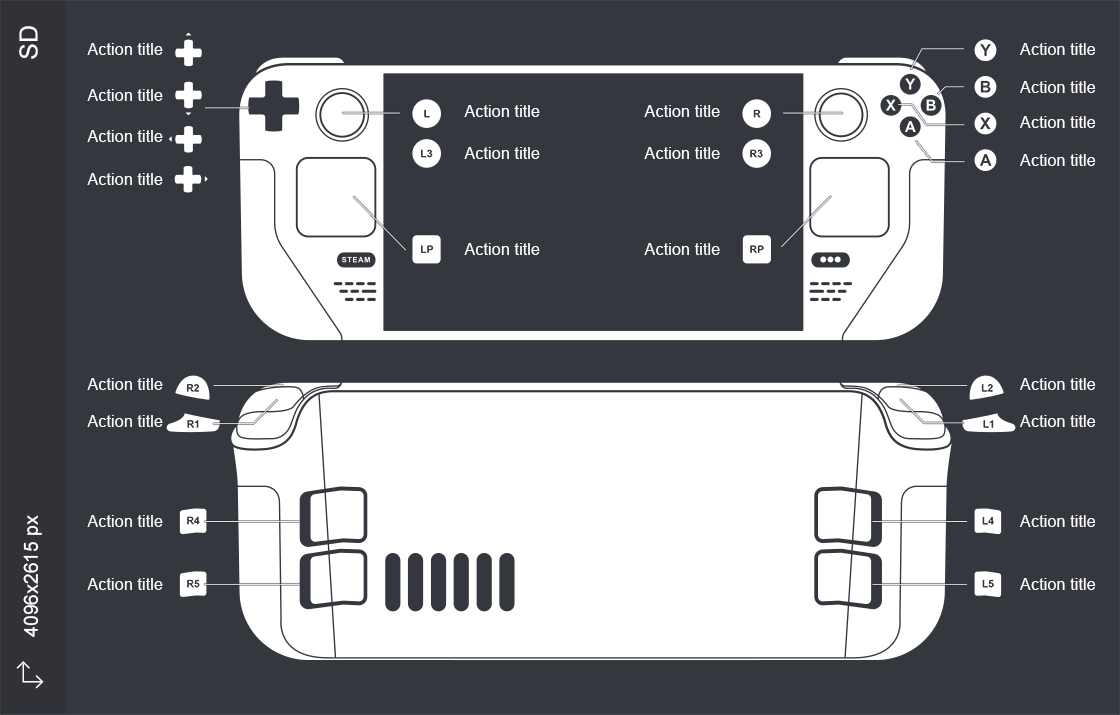
<style>
.page{position:relative;width:1120px;height:715px;background:#35373e}
.page>*{position:absolute;margin:0}
.t1{font:25px "ArialMT";color:#ffffff}
.t2{font:16.4px "ArialMT";color:#ffffff}
.t3{font:19.6px "ArialMT";color:#ffffff}
</style>
<div class="page">
<p class="t1" style="left:19px;top:26px;width:19px;height:33px;rotate:-90deg">SD</p>
<p class="t2" style="left:87px;top:43px;width:76px;height:12px">Action title</p>
<p class="t2" style="left:1020px;top:43px;width:76px;height:12px">Action title</p>
<p class="t2" style="left:87px;top:89px;width:76px;height:12px">Action title</p>
<p class="t2" style="left:1020px;top:81px;width:76px;height:12px">Action title</p>
<p class="t2" style="left:464px;top:105px;width:76px;height:12px">Action title</p>
<p class="t2" style="left:644px;top:105px;width:76px;height:12px">Action title</p>
<p class="t2" style="left:1020px;top:116px;width:76px;height:12px">Action title</p>
<p class="t2" style="left:87px;top:130px;width:76px;height:12px">Action title</p>
<p class="t2" style="left:464px;top:147px;width:76px;height:12px">Action title</p>
<p class="t2" style="left:644px;top:147px;width:76px;height:12px">Action title</p>
<p class="t2" style="left:1020px;top:154px;width:76px;height:12px">Action title</p>
<p class="t2" style="left:87px;top:173px;width:76px;height:12px">Action title</p>
<p class="t2" style="left:464px;top:243px;width:76px;height:12px">Action title</p>
<p class="t2" style="left:644px;top:243px;width:76px;height:12px">Action title</p>
<p class="t2" style="left:87px;top:378px;width:76px;height:12px">Action title</p>
<p class="t2" style="left:1020px;top:378px;width:76px;height:12px">Action title</p>
<p class="t2" style="left:87px;top:415px;width:76px;height:12px">Action title</p>
<p class="t2" style="left:1020px;top:415px;width:76px;height:12px">Action title</p>
<p class="t3" style="left:23px;top:515px;width:19px;height:122px;rotate:-90deg">4096x2615 px</p>
<p class="t2" style="left:87px;top:515px;width:76px;height:12px">Action title</p>
<p class="t2" style="left:1020px;top:515px;width:76px;height:12px">Action title</p>
<p class="t2" style="left:87px;top:578px;width:76px;height:12px">Action title</p>
<p class="t2" style="left:1020px;top:578px;width:76px;height:12px">Action title</p>
</div>
